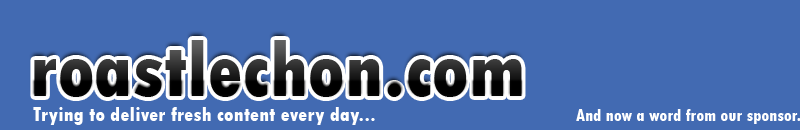
<style>
.page{position:relative;width:800px;height:130px;background:#426ab2}
.page>*{position:absolute;margin:0}
.t1{font:81.4px "TwCenMT-CondensedExtraBold"}
.t2{font:21.4px "TwCenMT-CondensedExtraBold";color:#ffffff}
.t3{font:17.3px "TwCenMT-CondensedExtraBold";color:#ffffff}
</style>
<div class="page">
<p class="t1" style="left:34px;top:40px;width:488px;height:57px">roastlechon.com</p>
<p class="t2" style="left:33px;top:107px;width:342px;height:18px">Trying to deliver fresh content every day...</p>
<p class="t3" style="left:576px;top:109px;width:225px;height:15px">And now a word from our sponsor.</p>
</div>
